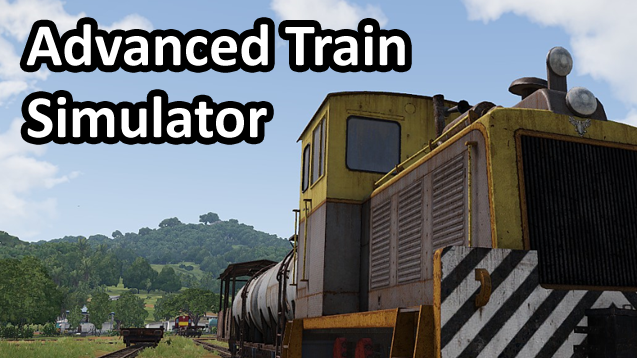
<style>
.page{position:relative;width:637px;height:358px}
.page>*{position:absolute;margin:0}
.t1{font:60px "Calibri-Bold";color:#ffffff}
</style>
<div class="page">
<p class="t1" style="left:26px;top:24px;width:379px;height:114px">Advanced Train <br>Simulator</p>
</div>
